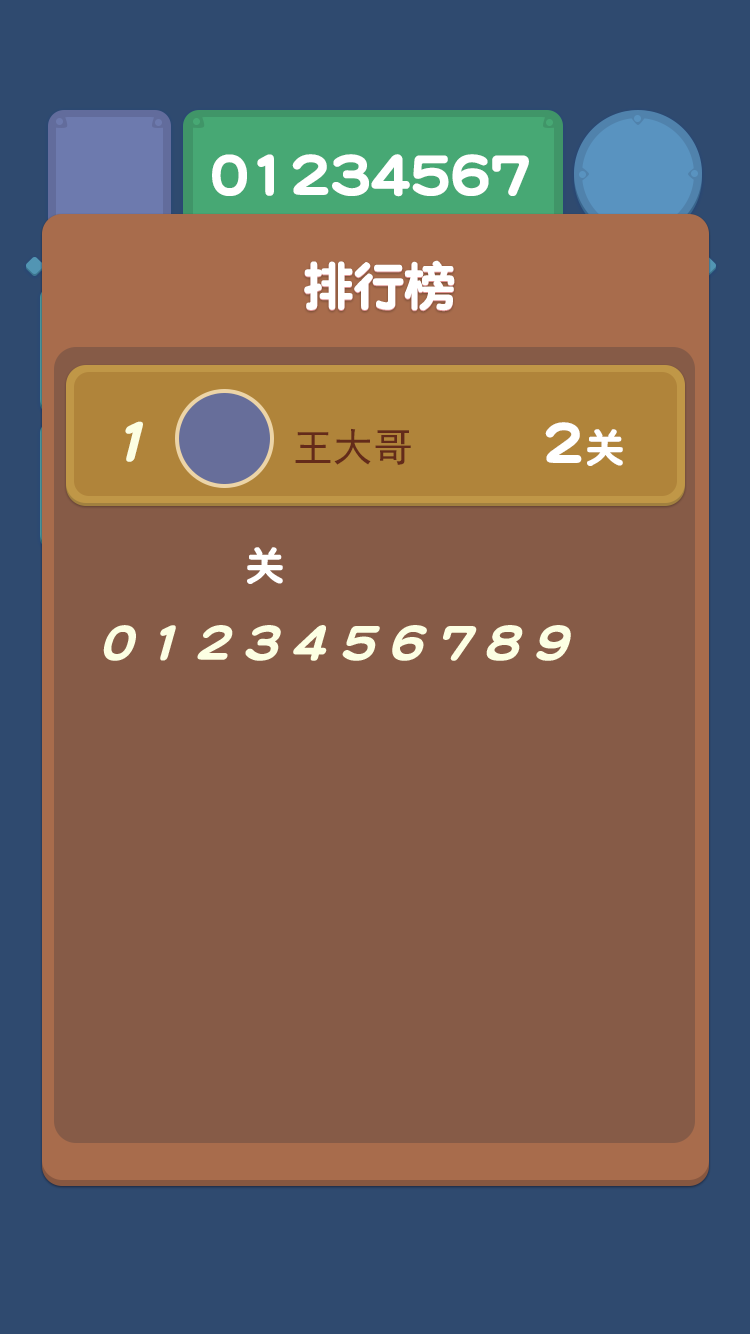
<style>
.page{position:relative;width:750px;height:1334px;background:#865b47}
.page>*{position:absolute;margin:0}
.t1{font:60px "DFPYuanW9";letter-spacing:-0.05em;color:#ffffff}
.t2{font:53.3px "DFPYuanW9";letter-spacing:-0.05em;color:#ffffff}
.t3{font:60px "DFPYuanW9";color:#fcffe3;scale:0.97 1}
.t4{font:60px "DFPYuanW9";color:#ffffff}
.t5{font:40px "DFPYuanW9";color:#ffffff}
.t6{font:40px "SimHei";color:#642b1a}
</style>
<div class="page">
<p class="t1" style="left:212px;top:154px;width:317px;height:43px">01234567</p>
<p class="t2" style="left:304px;top:261px;width:151px;height:51px">排行榜</p>
<p class="t2" style="left:304px;top:260px;width:151px;height:51px">排行榜</p>
<p class="t3" style="left:125px;top:421px;width:18px;height:41px">1</p>
<p class="t4" style="left:545px;top:422px;width:78px;height:44px">2<span class="t5">关</span></p>
<p class="t6" style="left:295px;top:428px;width:116px;height:37px">王大哥</p>
</div>
